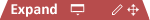
<style>
.page{position:relative;width:150px;height:20px;background:#b74c4c}
.page>*{position:absolute;margin:0}
.t1{font:15.5px "Calibri-Bold";color:#ffffff}
</style>
<div class="page">
<p class="t1" style="left:11px;top:3px;width:46px;height:14px">Expand</p>
</div>
